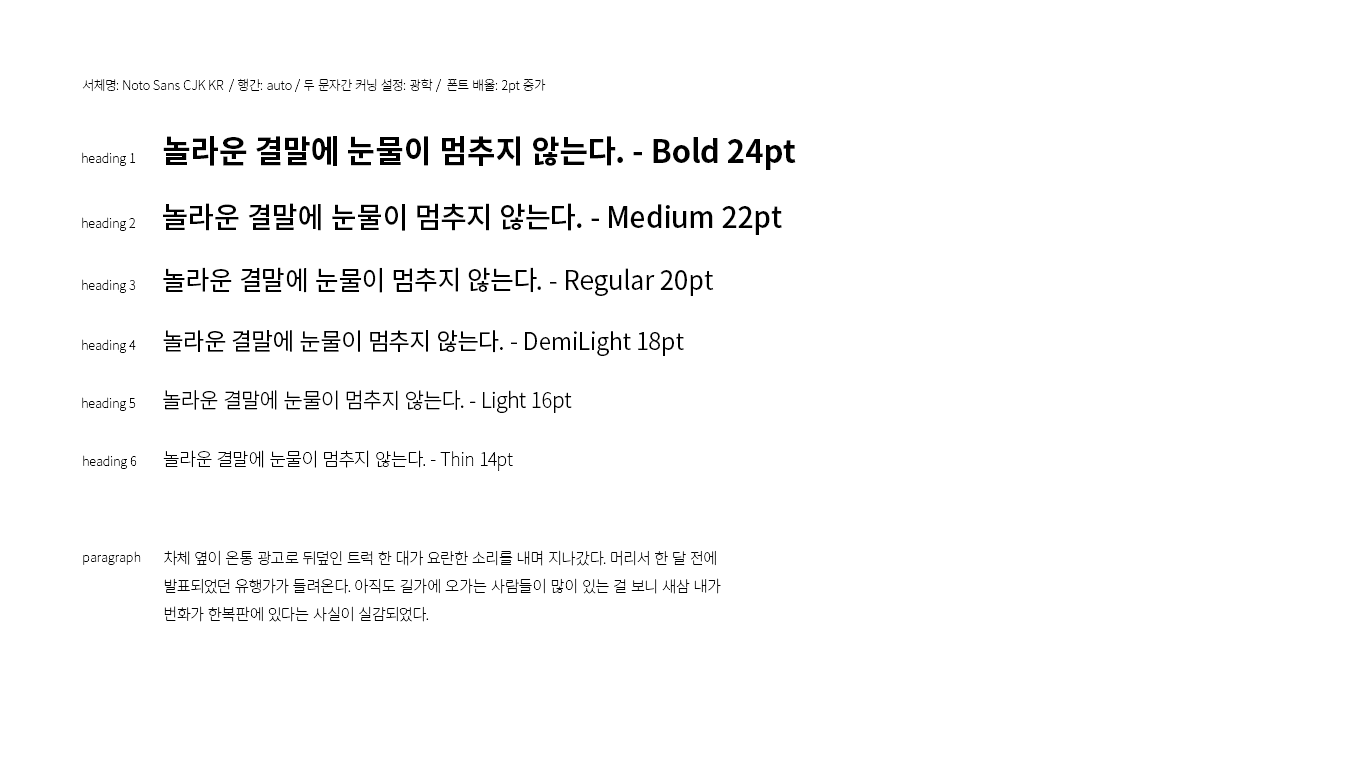
<style>
.page{position:relative;width:1366px;height:768px;background:#ffffff}
.page>*{position:absolute;margin:0}
.t1{font:13.3px "NotoSansCJKkr-Thin";color:#000000;scale:0.97 1}
.t2{font:32px "NotoSansCJKkr-Bold";color:#000000;scale:0.97 1}
.t3{font:29.3px "NotoSansCJKkr-Medium";color:#000000;scale:0.97 1}
.t4{font:26.7px "NotoSansCJKkr-Regular";color:#000000;scale:0.97 1}
.t5{font:24px "NotoSansCJKkr-DemiLight";color:#000000;scale:0.97 1}
.t6{font:21.3px "NotoSansCJKkr-Light";color:#000000;scale:0.97 1}
.t7{font:18.7px "NotoSansCJKkr-Thin";color:#000000;scale:0.97 1}
.t8{font:16px "NotoSansCJKkr-Thin";color:#000000;scale:0.97 1}
</style>
<div class="page">
<p class="t1" style="left:82px;top:78px;width:464px;height:15px">서체명: Noto Sans CJK KR  / 행간: auto / 두 문자간 커닝 설정: 광학 /  폰트 배율: 2pt 증가</p>
<p class="t2" style="left:163px;top:136px;width:633px;height:34px">놀라운 결말에 눈물이 멈추지 않는다. - Bold 24pt</p>
<p class="t1" style="left:82px;top:152px;width:54px;height:14px">heading 1</p>
<p class="t3" style="left:163px;top:203px;width:619px;height:32px">놀라운 결말에 눈물이 멈추지 않는다. - Medium 22pt</p>
<p class="t1" style="left:82px;top:217px;width:54px;height:14px">heading 2</p>
<p class="t4" style="left:163px;top:267px;width:551px;height:29px">놀라운 결말에 눈물이 멈추지 않는다. - Regular 20pt</p>
<p class="t1" style="left:82px;top:279px;width:54px;height:14px">heading 3</p>
<p class="t1" style="left:82px;top:339px;width:54px;height:14px">heading 4</p>
<p class="t5" style="left:163px;top:330px;width:521px;height:26px">놀라운 결말에 눈물이 멈추지 않는다. - DemiLight 18pt</p>
<p class="t6" style="left:163px;top:390px;width:409px;height:23px">놀라운 결말에 눈물이 멈추지 않는다. - Light 16pt</p>
<p class="t1" style="left:82px;top:397px;width:54px;height:14px">heading 5</p>
<p class="t1" style="left:83px;top:455px;width:54px;height:14px">heading 6</p>
<p class="t7" style="left:163px;top:450px;width:350px;height:21px">놀라운 결말에 눈물이 멈추지 않는다. - Thin 14pt</p>
<p class="t1" style="left:83px;top:551px;width:58px;height:14px">paragraph</p>
<p class="t8" style="left:164px;top:550px;width:557px;height:72px">차체 옆이 온통 광고로 뒤덮인 트럭 한 대가 요란한 소리를 내며 지나갔다. 머리서 한 달 전에 발표되었던 유행가가 들려온다. 아직도 길가에 오가는 사람들이 많이 있는 걸 보니 새삼 내가 번화가 한복판에 있다는 사실이 실감되었다.</p>
</div>
